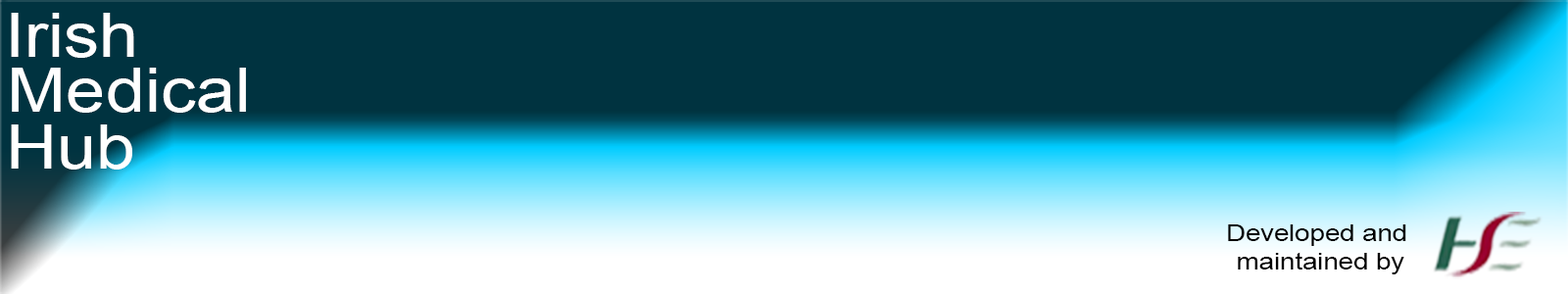
<style>
.page{position:relative;width:1568px;height:294px;background:#003340}
.page>*{position:absolute;margin:0}
.t1{font:61.6px "ArialMT";color:#ffffff;scale:1.15 1}
.t2{font:61.6px "ArialMT";color:#fefefe;scale:1.15 1}
.t3{font:23.5px "ArialMT";color:#000000;scale:1.15 1}
</style>
<div class="page">
<p class="t1" style="left:11px;top:13px;width:123px;height:45px">Irish</p>
<p class="t2" style="left:12px;top:68px;width:234px;height:45px">Medical</p>
<p class="t1" style="left:11px;top:124px;width:121px;height:46px">Hub</p>
<p class="t3" style="left:1228px;top:224px;width:178px;height:50px;text-align:center">Developed and<br> maintained by</p>
</div>
